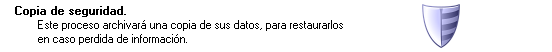
<style>
.page{position:relative;width:552px;height:52px;background:#ffffff}
.page>*{position:absolute;margin:0}
.t1{font:11.4px "MS Sans Serif";color:#000000;font-weight:bold}
.t2{font:11.4px "MS Sans Serif";color:#000000}
</style>
<div class="page">
<p class="t1" style="left:15px;top:6px;width:111px;height:11px">Copia de seguridad.</p>
<p class="t2" style="left:38px;top:20px;width:305px;height:25px">Este proceso archivará una copia de sus datos, para restaurarlos <br>en caso perdida de información.</p>
</div>
